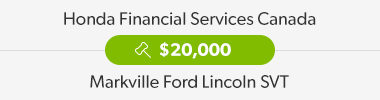
<style>
.page{position:relative;width:380px;height:100px;background:#f5f5f5}
.page>*{position:absolute;margin:0}
.t1{font:18px "Gibson-Regular";color:#333333}
.t2{font:18px "Gibson-SemiBold";color:#ffffff}
</style>
<div class="page">
<p class="t1" style="left:64px;top:12px;width:252px;height:13px">Honda Financial Services Canada</p>
<p class="t2" style="left:159px;top:42px;width:72px;height:17px">$20,000</p>
<p class="t1" style="left:90px;top:75px;width:199px;height:13px">Markville Ford Lincoln SVT</p>
</div>
